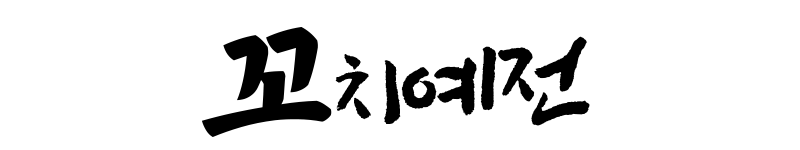
<style>
.page{position:relative;width:800px;height:150px;background:#ffffff}
.page>*{position:absolute;margin:0}
.t1{font:110px "SangSangRockOTF";color:#000000}
.t2{font:150px "Dokrip";color:#000000}
.t3{font:90px "SangSangRockOTF";color:#000000}
</style>
<div class="page">
<p class="t1" style="left:201px;top:27px;width:389px;height:110px"><span class="t2">꼬</span><span class="t3">치</span>예전</p>
</div>
